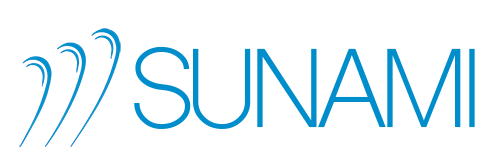
<style>
.page{position:relative;width:500px;height:167px;background:#ffffff}
.page>*{position:absolute;margin:0}
.t1{font:105.6px "ShreeDev0714";letter-spacing:-0.075em;color:#008dcc}
</style>
<div class="page">
<p class="t1" style="left:134px;top:46px;width:341px;height:83px">SUNAMI</p>
</div>
